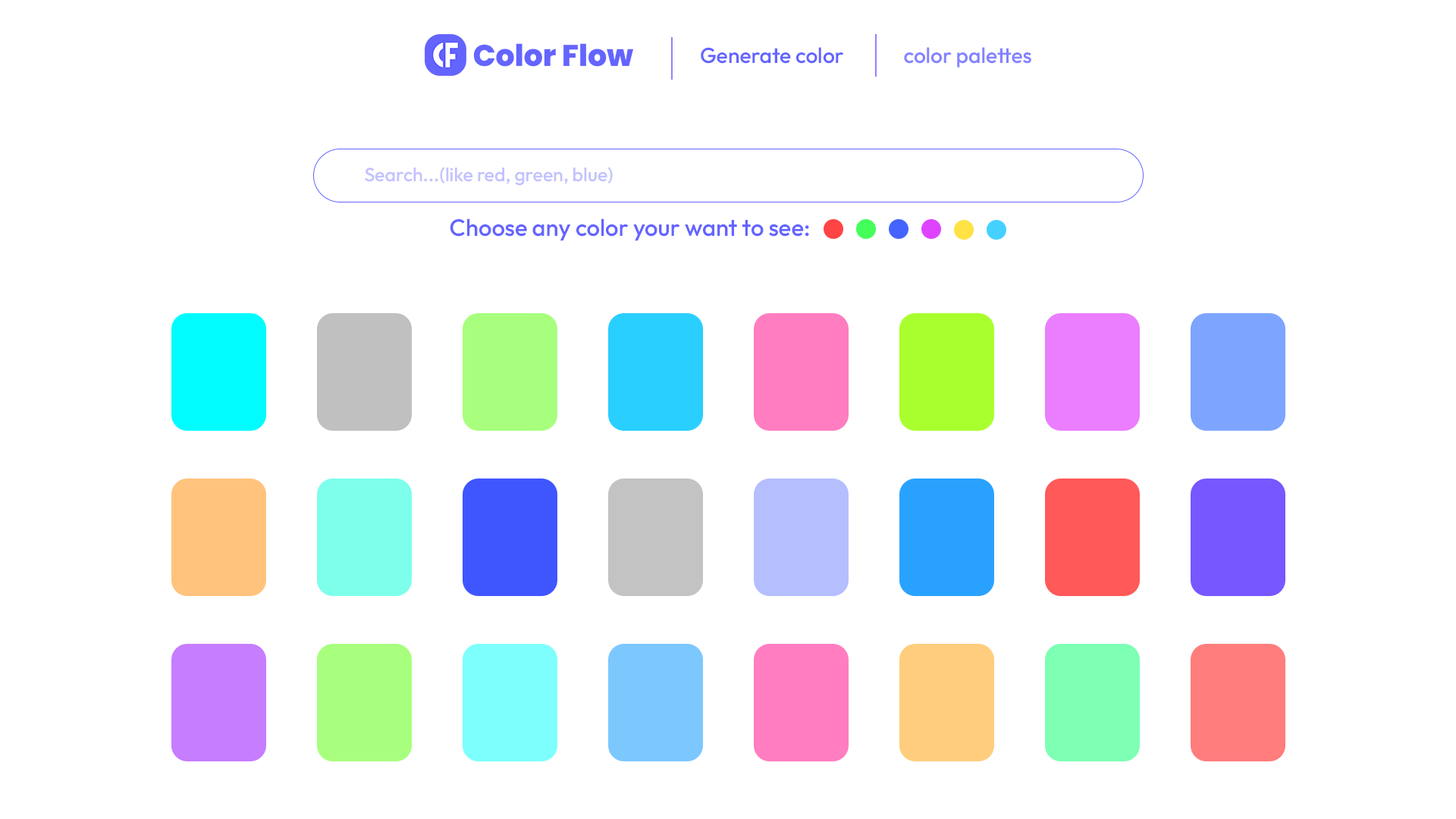
<style>
.page{position:relative;width:1456px;height:819px;background:#ffffff}
.page>*{position:absolute;margin:0}
.t1{font:21.5px "Outfit-Medium";color:#6464ff}
.t2{font:21.5px "Outfit-Medium";color:#8383ff}
.t3{font:19px "Outfit-Medium";color:#c2c2ff}
.t4{font:23.5px "Outfit-Medium";color:#6464ff}
</style>
<div class="page">
<p class="t1" style="left:701px;top:47px;width:143px;height:17px">Generate color</p>
<p class="t2" style="left:904px;top:47px;width:127px;height:20px">color palettes</p>
<p class="t3" style="left:365px;top:167px;width:248px;height:19px">Search...(like red, green, blue)</p>
<p class="t4" style="left:450px;top:218px;width:359px;height:23px">Choose any color your want to see:</p>
</div>
